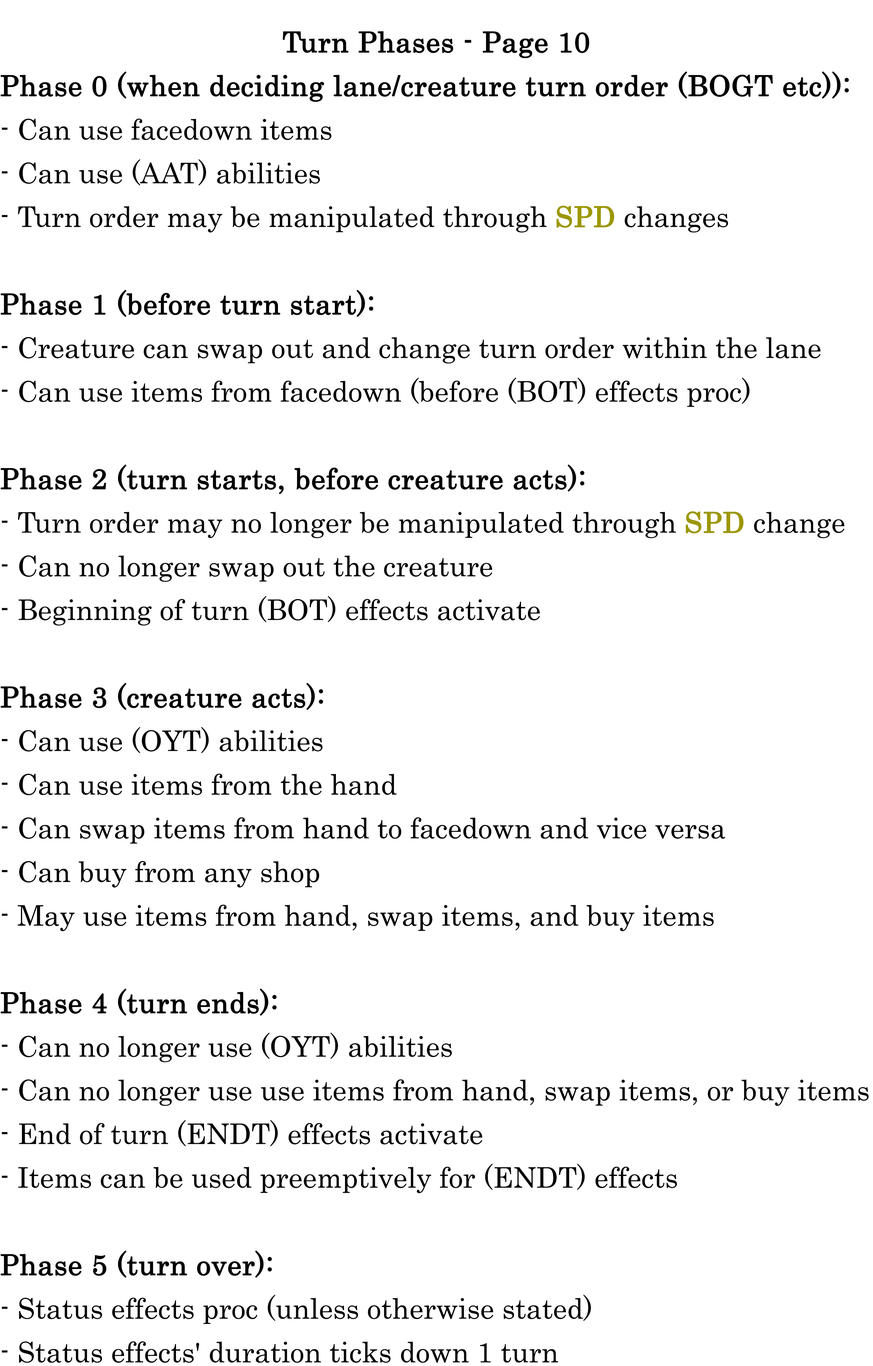
<style>
.page{position:relative;width:873px;height:1366px;background:#ffffff}
.page>*{position:absolute;margin:0}
.t1{font:48.5px/43.7px "Century";color:#000000}
.t2{font:48.5px/43.7px "Century";color:#000000;font-weight:bold}
.t3{font:48.5px/43.7px "Century";color:#9c9700;font-weight:bold}
</style>
<div class="page">
<p class="t1" style="left:1px;top:31px;width:868px;height:1331px;text-align:center"><span class="t2">Turn Phases - Page 10<br>Phase 0 (when deciding lane/creature turn order (BOGT etc)):<br></span>- Can use facedown items<br>- Can use (AAT) abilities<br>- Turn order may be manipulated through <span class="t3">SPD</span> changes<br><span class="t2"><br>Phase 1 (before turn start):</span><br>- Creature can swap out and change turn order within the lane<br>- Can use items from facedown (before (BOT) effects proc)<br><br><span class="t2">Phase 2 (turn starts, before creature acts):</span><br>- Turn order may no longer be manipulated through <span class="t3">SPD</span> change<br>- Can no longer swap out the creature<br>- Beginning of turn (BOT) effects activate<br><br><span class="t2">Phase 3 (creature acts):<br></span>- Can use (OYT) abilities<br>- Can use items from the hand<br>- Can swap items from hand to facedown and vice versa<br>- Can buy from any shop<br>- May use items from hand, swap items, and buy items<br><br><span class="t2">Phase 4 (turn ends):<br></span>- Can no longer use (OYT) abilities<br>- Can no longer use use items from hand, swap items, or buy items<br>- End of turn (ENDT) effects activate<br>- Items can be used preemptively for (ENDT) effects<br><br><span class="t2">Phase 5 (turn over):<br></span>- Status effects proc (unless otherwise stated)<br>- Status effects' duration ticks down 1 turn</p>
</div>
